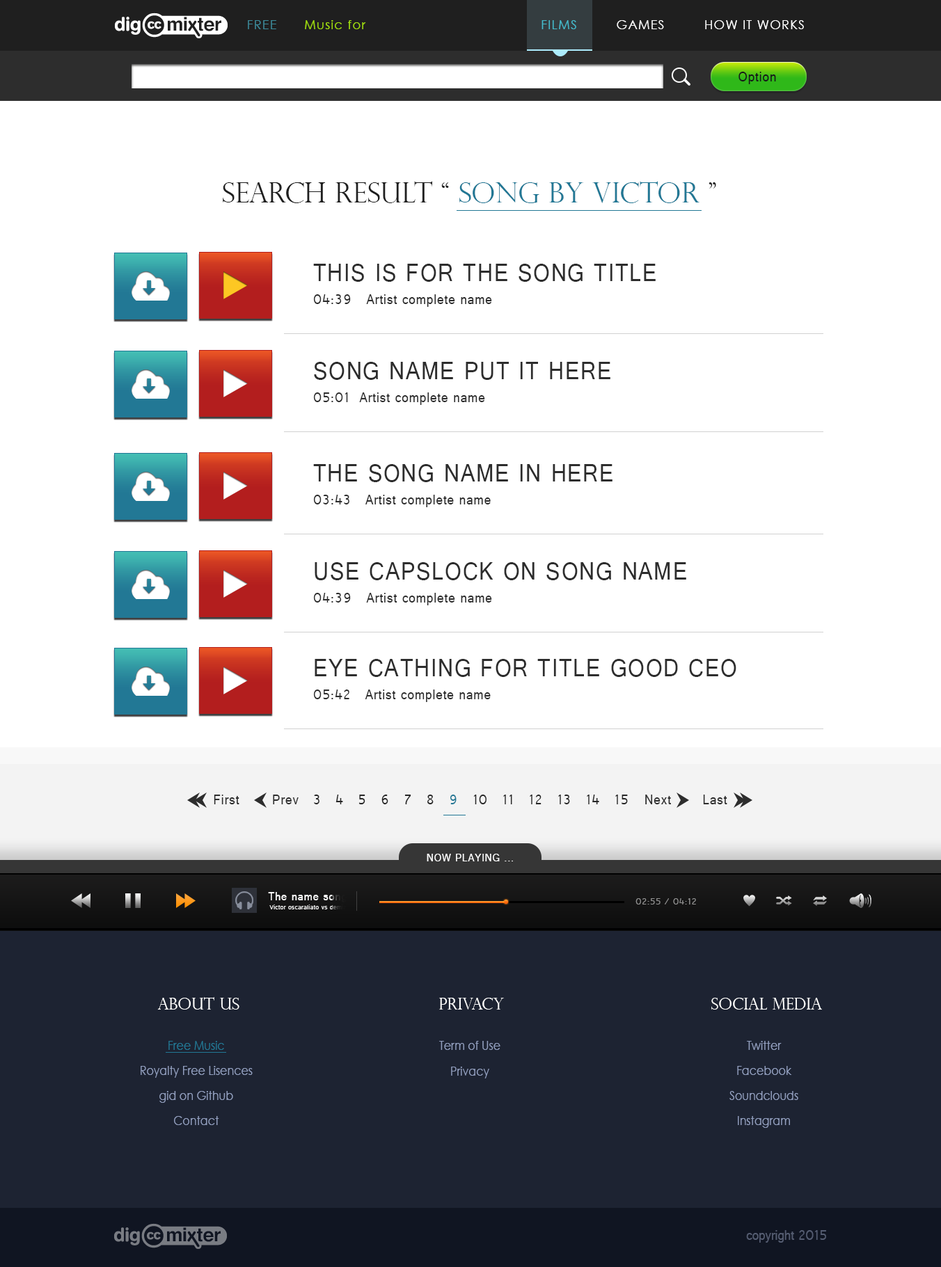
<style>
.page{position:relative;width:941px;height:1267px;background:#ffffff}
.page>*{position:absolute;margin:0}
.t1{font:12.5px "CenturyGothic";letter-spacing:0.075em;color:#3d8c9b}
.t2{font:12.5px "CenturyGothic";letter-spacing:0.075em;color:#a1dd0c}
.t3{font:12.5px "CenturyGothic";letter-spacing:0.075em;color:#45bdce}
.t4{font:12.5px "CenturyGothic";letter-spacing:0.075em;color:#ffffff}
.t5{font:14.6px "Raavi";letter-spacing:0.05em;color:#171719;scale:0.9 1}
.t6{font:27.8px "PerpetuaTitlingMT-Light";color:#1f1f1f}
.t7{font:27.8px "PerpetuaTitlingMT-Light";color:#227895}
.t8{font:26.3px "Raavi";letter-spacing:0.05em;color:#2d2d2d;scale:0.9 1}
.t9{font:14.6px "Raavi";letter-spacing:0.05em;color:#2d2d2d;scale:0.9 1}
.t10{font:14.6px "Raavi";letter-spacing:0.05em;color:#262626;scale:0.9 1}
.t11{font:14.6px "Raavi";letter-spacing:0.05em;color:#227895;scale:0.9 1}
.t12{font:11.7px "Raavi";letter-spacing:0.05em;color:#ffffff;scale:0.9 1}
.t13{font:12.5px "Raavi";letter-spacing:0.05em;color:#ffffff;scale:0.9 1}
.t14{font:7px "Raavi";letter-spacing:0.05em;color:#ffffff;scale:0.9 1}
.t15{font:9.7px "Raavi";letter-spacing:0.05em;color:#909090;scale:0.9 1}
.t16{font:16.3px "PerpetuaTitlingMT-Light";color:#ffffff}
.t17{font:12.4px/25.1px "CenturyGothic";color:#929fbf;scale:0.89 1}
.t18{font:12.4px/25.1px "CenturyGothic";color:#227895;scale:0.89 1}
.t19{font:12.5px/25.1px "CenturyGothic";color:#929fbf;scale:0.89 1}
.t20{font:14.6px "Raavi";color:#545c71;scale:0.89 1}
</style>
<div class="page">
<p class="t1" style="left:248px;top:20px;width:28px;height:9px">FREE</p>
<p class="t2" style="left:305px;top:20px;width:61px;height:9px">Music for</p>
<p class="t3" style="left:541px;top:20px;width:35px;height:9px">FILMS</p>
<p class="t4" style="left:617px;top:20px;width:47px;height:9px">GAMES</p>
<p class="t4" style="left:705px;top:20px;width:99px;height:9px">HOW IT WORKS</p>
<p class="t5" style="left:738px;top:72px;width:38px;height:12px">Option</p>
<p class="t6" style="left:223px;top:181px;width:493px;height:22px">SEARCH RESULT “ <span class="t7">Song by victor</span> ”</p>
<p class="t8" style="left:313px;top:264px;width:343px;height:18px">THIS IS FOR THE SONG TITLE</p>
<p class="t9" style="left:313px;top:294px;width:179px;height:13px">04:39   Artist complete name</p>
<p class="t8" style="left:314px;top:362px;width:296px;height:18px">SONG NAME PUT IT HERE</p>
<p class="t9" style="left:313px;top:393px;width:172px;height:12px">05:01  Artist complete name</p>
<p class="t8" style="left:313px;top:464px;width:299px;height:18px">THE SONG NAME IN HERE</p>
<p class="t9" style="left:313px;top:495px;width:178px;height:12px">03:43   Artist complete name</p>
<p class="t8" style="left:315px;top:562px;width:371px;height:18px">USE CAPSLOCK ON SONG NAME</p>
<p class="t9" style="left:313px;top:593px;width:179px;height:12px">04:39   Artist complete name</p>
<p class="t8" style="left:315px;top:659px;width:421px;height:18px">EYE CATHING FOR TITLE GOOD CEO</p>
<p class="t9" style="left:313px;top:690px;width:178px;height:12px">05:42   Artist complete name</p>
<p class="t9" style="left:214px;top:795px;width:25px;height:10px">First</p>
<p class="t9" style="left:273px;top:795px;width:26px;height:10px">Prev</p>
<p class="t10" style="left:314px;top:795px;width:314px;height:10px">3   4   5   6   7   8   <span class="t11">9</span>   10   11   12   13   14   15</p>
<p class="t9" style="left:645px;top:795px;width:26px;height:10px">Next</p>
<p class="t9" style="left:703px;top:795px;width:24px;height:10px">Last</p>
<p class="t12" style="left:427px;top:854px;width:86px;height:8px">NOW PLAYING ...</p>
<p class="t13" style="left:268px;top:892px;width:79px;height:11px">The name song</p>
<p class="t14" style="left:269px;top:905px;width:78px;height:5px">Victor oscaraliato vs demia</p>
<p class="t15" style="left:635px;top:898px;width:61px;height:7px">02:55 / 04:12</p>
<p class="t16" style="left:157px;top:997px;width:82px;height:13px">ABout us</p>
<p class="t16" style="left:439px;top:998px;width:65px;height:12px">Privacy</p>
<p class="t16" style="left:711px;top:998px;width:111px;height:12px">SOCIAL MEDIA</p>
<p class="t17" style="left:141px;top:1041px;width:112px;height:84px;text-align:center"><span class="t18">Free Music<br></span>Royalty Free Lisences<br>gid on Github<br>Contact</p>
<p class="t19" style="left:439px;top:1041px;width:61px;height:38px;text-align:center">Term of Use<br>Privacy</p>
<p class="t17" style="left:729px;top:1041px;width:69px;height:87px;text-align:center">Twitter<br>Facebook<br>Soundclouds<br>Instagram</p>
<p class="t20" style="left:746px;top:1230px;width:80px;height:13px">copyright 2015</p>
</div>
